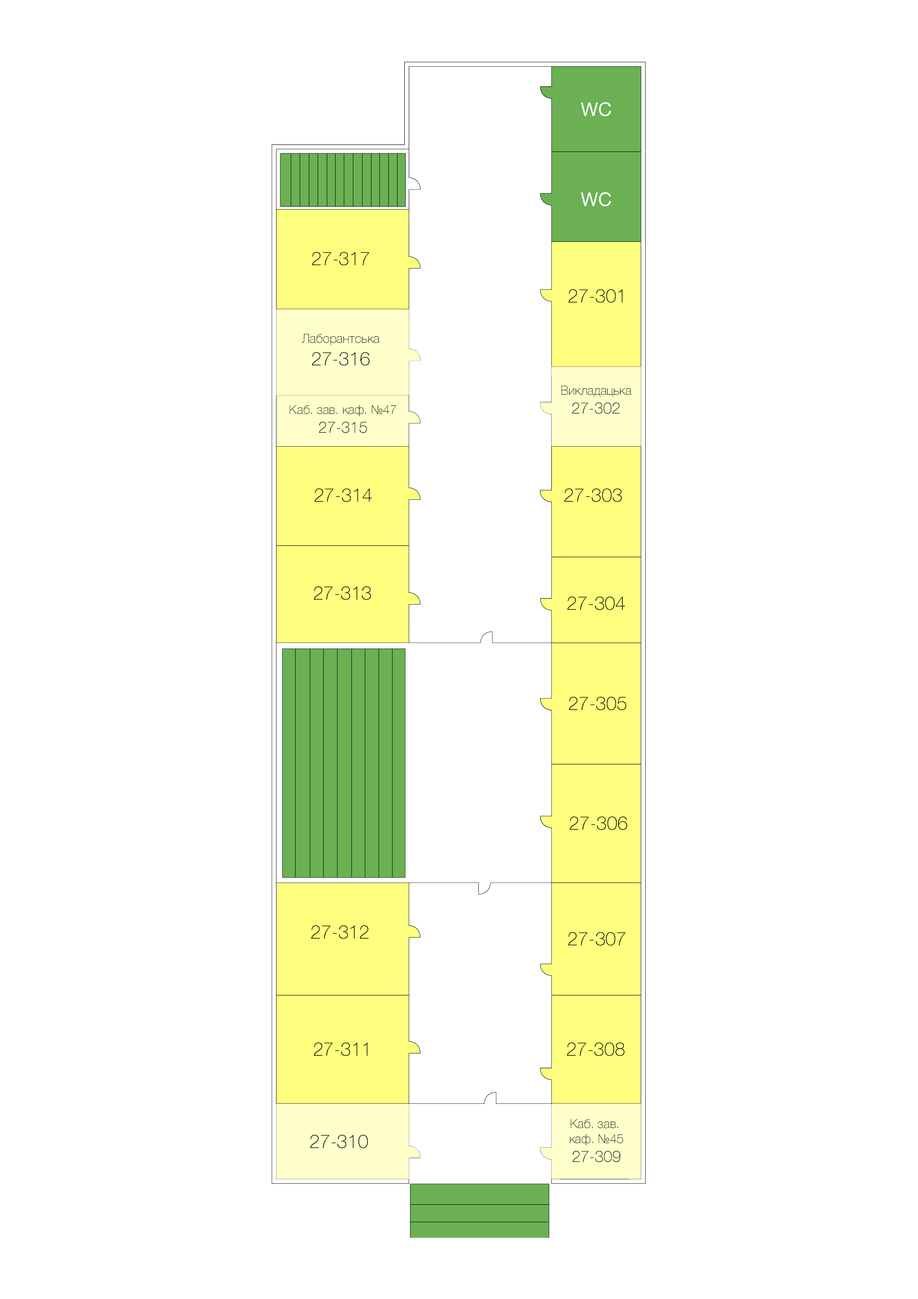
<style>
.page{position:relative;width:918px;height:1299px;background:#ffffff}
.page>*{position:absolute;margin:0}
.t1{font:18.8px "HelveticaNeue-Thin";color:#000000}
.t2{font:12.6px "HelveticaNeue-Thin";color:#000000}
.t3{font:15.7px "HelveticaNeue-Thin";color:#000000}
</style>
<div class="page">
<p class="t1" style="left:312px;top:252px;width:57px;height:14px">27-317</p>
<p class="t1" style="left:568px;top:289px;width:55px;height:14px">27-301</p>
<p class="t2" style="left:302px;top:334px;width:78px;height:32px;text-align:center">Лаборантська<br><span class="t1">27-316</span></p>
<p class="t2" style="left:561px;top:386px;width:71px;height:28px;text-align:center">Викладацька<br><span class="t3">27-302</span></p>
<p class="t2" style="left:290px;top:405px;width:106px;height:28px;text-align:center">Каб. зав. каф. №47<br><span class="t3">27-315</span></p>
<p class="t1" style="left:315px;top:489px;width:57px;height:13px">27-314</p>
<p class="t1" style="left:564px;top:489px;width:58px;height:13px">27-303</p>
<p class="t1" style="left:314px;top:586px;width:57px;height:14px">27-313</p>
<p class="t1" style="left:567px;top:597px;width:58px;height:13px">27-304</p>
<p class="t1" style="left:569px;top:697px;width:57px;height:13px">27-305</p>
<p class="t1" style="left:570px;top:817px;width:57px;height:13px">27-306</p>
<p class="t1" style="left:311px;top:925px;width:58px;height:14px">27-312</p>
<p class="t1" style="left:568px;top:932px;width:57px;height:14px">27-307</p>
<p class="t1" style="left:314px;top:1043px;width:54px;height:13px">27-311</p>
<p class="t1" style="left:567px;top:1043px;width:57px;height:13px">27-308</p>
<p class="t2" style="left:570px;top:1119px;width:53px;height:43px;text-align:center">Каб. зав. <br>каф. №45<br><span class="t3">27-309</span></p>
<p class="t1" style="left:310px;top:1135px;width:58px;height:13px">27-310</p>
</div>
